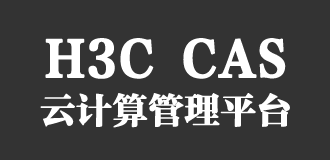
<style>
.page{position:relative;width:330px;height:160px;background:#333333}
.page>*{position:absolute;margin:0}
.t1{font:48px "FZFYSJW--GB1-0";color:#ffffff;font-weight:bold}
.t2{font:36px "FZFYSJW--GB1-0";letter-spacing:-0.025em;color:#ffffff;font-weight:bold}
</style>
<div class="page">
<p class="t1" style="left:45px;top:38px;width:241px;height:41px">H3C CAS</p>
<p class="t2" style="left:40px;top:93px;width:250px;height:35px">云计算管理平台</p>
</div>
